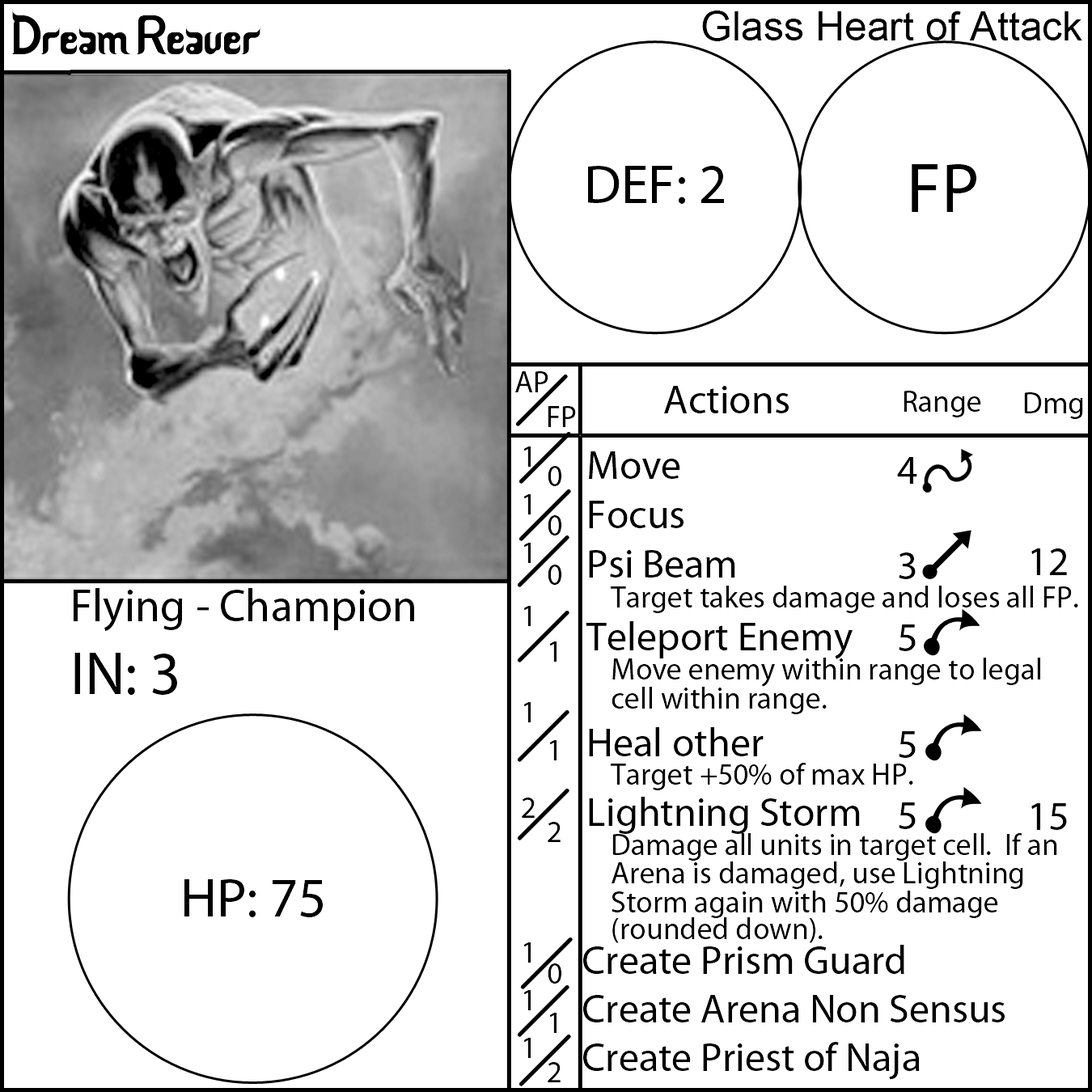
<style>
.page{position:relative;width:1092px;height:1092px;background:#ffffff}
.page>*{position:absolute;margin:0}
.t1{font:55.6px "CeriaLebaran";color:#000000}
.t2{font:40.4px "ArialMT";color:#000000}
.t3{font:55.6px "MyriadPro-Regular";color:#000000}
.t4{font:70.8px "MyriadPro-Regular";color:#000000}
.t5{font:30.3px "MyriadPro-Regular";color:#000000}
.t6{font:40.4px "MyriadPro-Regular";color:#000000}
.t7{font:45.5px "MyriadPro-Regular";color:#000000}
.t8{font:60.7px "MyriadPro-Regular";color:#000000}
</style>
<div class="page">
<p class="t1" style="left:11px;top:10px;width:249px;height:44px">Dream Reaver</p>
<p class="t2" style="left:702px;top:11px;width:380px;height:30px">Glass Heart of Attack</p>
<p class="t3" style="left:588px;top:166px;width:136px;height:38px">DEF: 2</p>
<p class="t4" style="left:912px;top:164px;width:64px;height:48px">FP</p>
<p class="t5" style="left:515px;top:371px;width:33px;height:21px">AP</p>
<p class="t6" style="left:664px;top:386px;width:125px;height:27px">Actions</p>
<p class="t5" style="left:904px;top:391px;width:77px;height:26px">Range</p>
<p class="t5" style="left:1024px;top:392px;width:59px;height:27px">Dmg</p>
<p class="t5" style="left:548px;top:406px;width:28px;height:21px">FP</p>
<p class="t5" style="left:522px;top:447px;width:13px;height:611px">1<br>1<br>1<br>1<br><br>1<br><br>2<br><br><br>1<br>1<br>1</p>
<p class="t5" style="left:583px;top:451px;width:495px;height:629px"><span class="t6">Move<br>Focus<br>Psi Beam<br></span> Target takes damage and loses all FP.<br><span class="t6">Teleport Enemy<br></span> Move enemy within range to legal <br> cell within range.<br><span class="t6">Heal other<br></span> Target +50% of max HP.<br><span class="t6">Lightning Storm<br> </span>Damage all units in target cell.  If an <br> Arena is damaged, use Lightning <br> Storm again with 50% damage<br> (rounded down).<br><span class="t6">Create Prism Guard<br>Create Arena Non Sensus<br>Create Priest of Naja</span></p>
<p class="t6" style="left:897px;top:457px;width:20px;height:372px;text-align:center">4<br>3<br>5<br><br>5<br>5</p>
<p class="t5" style="left:548px;top:466px;width:13px;height:616px">0<br>0<br>0<br>1<br><br>1<br> <br>2<br><br>  <br>0<br>1<br>2</p>
<p class="t6" style="left:1031px;top:548px;width:36px;height:282px;text-align:center">12<br><br><br><br>15</p>
<p class="t7" style="left:74px;top:588px;width:340px;height:107px">Flying - Champion<br><span class="t8">IN: 3</span></p>
<p class="t3" style="left:184px;top:879px;width:139px;height:38px">HP: 75</p>
</div>
